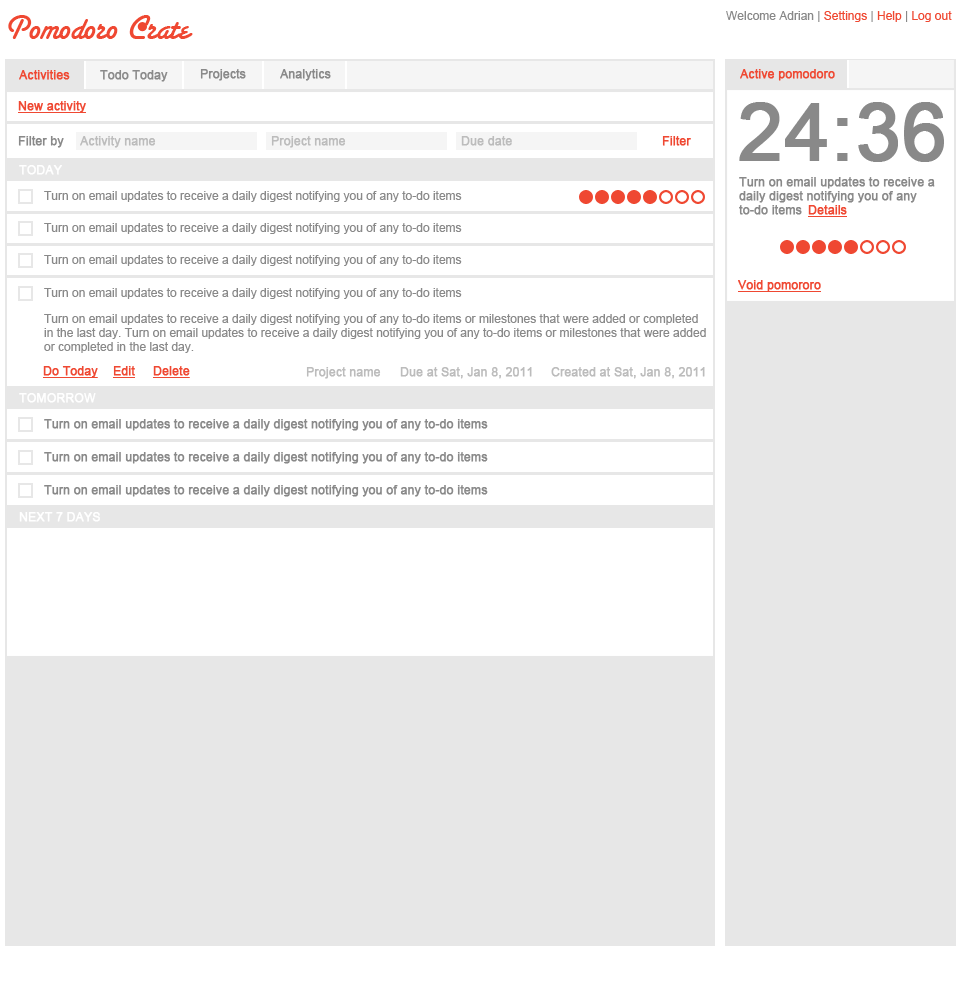
<style>
.page{position:relative;width:960px;height:1000px;background:#e7e7e7}
.page>*{position:absolute;margin:0}
.t1{font:36px "SantaFeLetPlain";color:#ef4832}
.t2{font:12px "ArialMT";color:#898989}
.t3{font:12px "ArialMT";color:#ef4832}
.t4{font:12px "ArialMT";color:#ef4832;font-weight:bold}
.t5{font:12px "ArialMT";color:#898989;font-weight:bold}
.t6{font:12px "ArialMT";color:#ef4832;font-weight:bold;text-decoration:underline}
.t7{font:80px "ArialMT";color:#898989;font-weight:bold}
.t8{font:12px "ArialMT";color:#bcbcbc;font-weight:bold}
.t9{font:12px "ArialMT";color:#ffffff;font-weight:bold}
.t10{font:12px/14px "ArialMT";color:#898989;font-weight:bold}
.t11{font:12px/14px "ArialMT";color:#898989}
</style>
<div class="page">
<p class="t1" style="left:8px;top:15px;width:185px;height:24px">Pomodoro Crate</p>
<p class="t2" style="left:726px;top:11px;width:226px;height:11px">Welcome Adrian |<span class="t3"> Settings</span> | <span class="t3">Help</span> | <span class="t3">Log out</span></p>
<p class="t4" style="left:19px;top:70px;width:51px;height:10px">Activities</p>
<p class="t5" style="left:100px;top:70px;width:68px;height:12px">Todo Today</p>
<p class="t5" style="left:200px;top:69px;width:46px;height:12px">Projects</p>
<p class="t5" style="left:280px;top:69px;width:51px;height:12px">Analytics</p>
<p class="t4" style="left:740px;top:69px;width:95px;height:12px">Active pomodoro</p>
<p class="t6" style="left:18px;top:101px;width:68px;height:12px">New activity</p>
<p class="t7" style="left:739px;top:102px;width:205px;height:60px">24:36</p>
<p class="t5" style="left:18px;top:136px;width:46px;height:12px">Filter by</p>
<p class="t8" style="left:80px;top:136px;width:76px;height:12px">Activity name</p>
<p class="t8" style="left:271px;top:136px;width:75px;height:12px">Project name</p>
<p class="t8" style="left:461px;top:136px;width:51px;height:10px">Due date</p>
<p class="t4" style="left:662px;top:136px;width:29px;height:10px">Filter</p>
<p class="t9" style="left:19px;top:165px;width:43px;height:10px">TODAY</p>
<p class="t10" style="left:739px;top:177px;width:196px;height:38px">Turn on email updates to receive a <br>daily digest notifying you of any <br>to-do items</p>
<p class="t2" style="left:44px;top:191px;width:418px;height:11px">Turn on email updates to receive a daily digest notifying you of any to-do items</p>
<p class="t6" style="left:808px;top:205px;width:39px;height:12px">Details</p>
<p class="t2" style="left:44px;top:223px;width:418px;height:11px">Turn on email updates to receive a daily digest notifying you of any to-do items</p>
<p class="t2" style="left:44px;top:255px;width:418px;height:11px">Turn on email updates to receive a daily digest notifying you of any to-do items</p>
<p class="t6" style="left:738px;top:280px;width:83px;height:12px">Void pomororo</p>
<p class="t2" style="left:44px;top:288px;width:418px;height:11px">Turn on email updates to receive a daily digest notifying you of any to-do items</p>
<p class="t11" style="left:44px;top:314px;width:662px;height:39px">Turn on email updates to receive a daily digest notifying you of any to-do items or milestones that were added or completed <br>in the last day. Turn on email updates to receive a daily digest notifying you of any to-do items or milestones that were added <br>or completed in the last day.</p>
<p class="t6" style="left:43px;top:366px;width:55px;height:12px">Do Today</p>
<p class="t6" style="left:113px;top:366px;width:22px;height:12px">Edit</p>
<p class="t6" style="left:153px;top:366px;width:37px;height:12px">Delete</p>
<p class="t8" style="left:306px;top:367px;width:75px;height:12px">Project name</p>
<p class="t8" style="left:400px;top:367px;width:132px;height:12px">Due at Sat, Jan 8, 2011</p>
<p class="t8" style="left:551px;top:367px;width:154px;height:12px">Created at Sat, Jan 8, 2011</p>
<p class="t9" style="left:19px;top:393px;width:77px;height:10px">TOMORROW</p>
<p class="t5" style="left:44px;top:419px;width:444px;height:12px">Turn on email updates to receive a daily digest notifying you of any to-do items</p>
<p class="t5" style="left:44px;top:452px;width:444px;height:12px">Turn on email updates to receive a daily digest notifying you of any to-do items</p>
<p class="t5" style="left:44px;top:485px;width:444px;height:12px">Turn on email updates to receive a daily digest notifying you of any to-do items</p>
<p class="t9" style="left:19px;top:512px;width:81px;height:10px">NEXT 7 DAYS</p>
</div>
